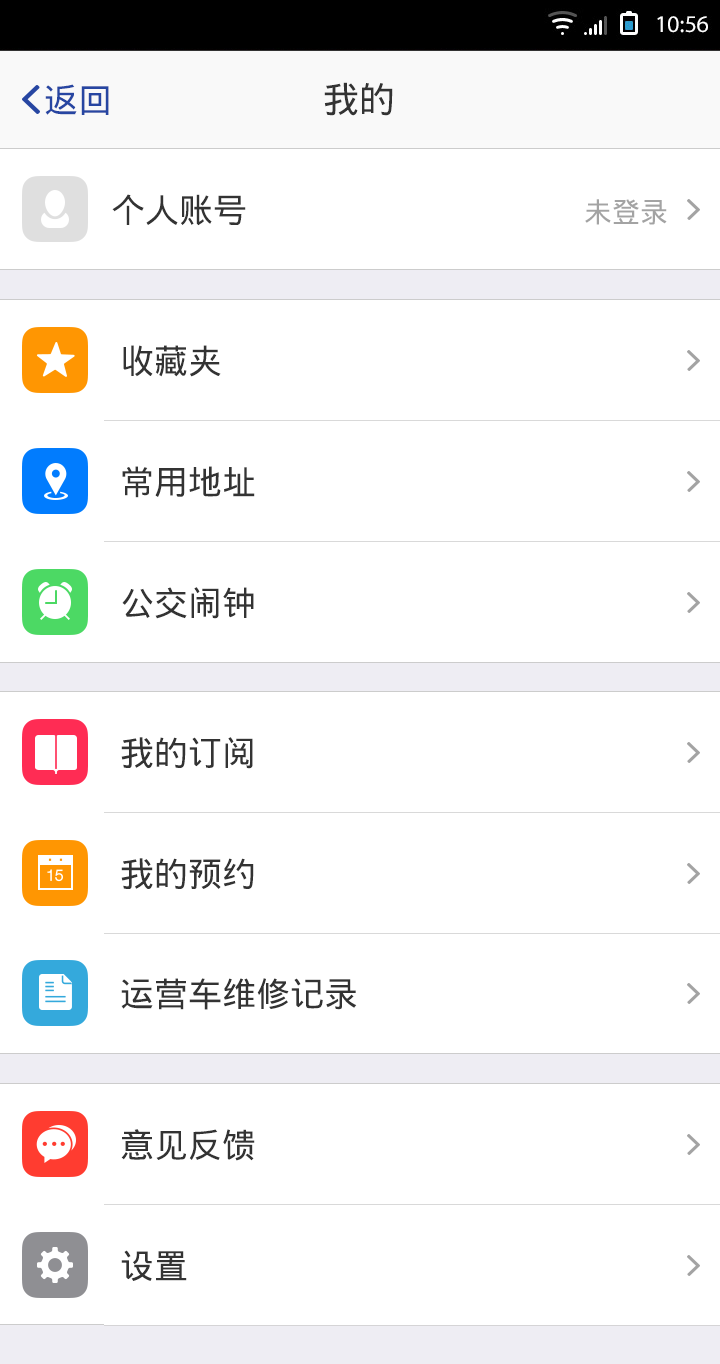
<style>
.page{position:relative;width:720px;height:1364px;background:#ffffff}
.page>*{position:absolute;margin:0}
.t1{font:34px "DroidSansFallback";color:#2746a2}
.t2{font:36px "DroidSansFallback";color:#333333}
.t3{font:34px "DroidSansFallback";color:#333333}
.t4{font:28px "DroidSansFallback";color:#a3a3a3}
</style>
<div class="page">
<p class="t1" style="left:45px;top:84px;width:64px;height:31px">返回</p>
<p class="t2" style="left:324px;top:82px;width:69px;height:34px">我的</p>
<p class="t3" style="left:112px;top:194px;width:134px;height:32px">个人账号</p>
<p class="t4" style="left:585px;top:199px;width:82px;height:26px">未登录</p>
<p class="t3" style="left:123px;top:345px;width:98px;height:32px">收藏夹</p>
<p class="t3" style="left:122px;top:466px;width:133px;height:32px">常用地址</p>
<p class="t3" style="left:122px;top:587px;width:132px;height:32px">公交闹钟</p>
<p class="t3" style="left:121px;top:737px;width:132px;height:32px">我的订阅</p>
<p class="t3" style="left:121px;top:858px;width:133px;height:31px">我的预约</p>
<p class="t3" style="left:121px;top:978px;width:236px;height:32px">运营车维修记录</p>
<p class="t3" style="left:121px;top:1129px;width:134px;height:32px">意见反馈</p>
<p class="t3" style="left:121px;top:1250px;width:66px;height:31px">设置</p>
</div>
